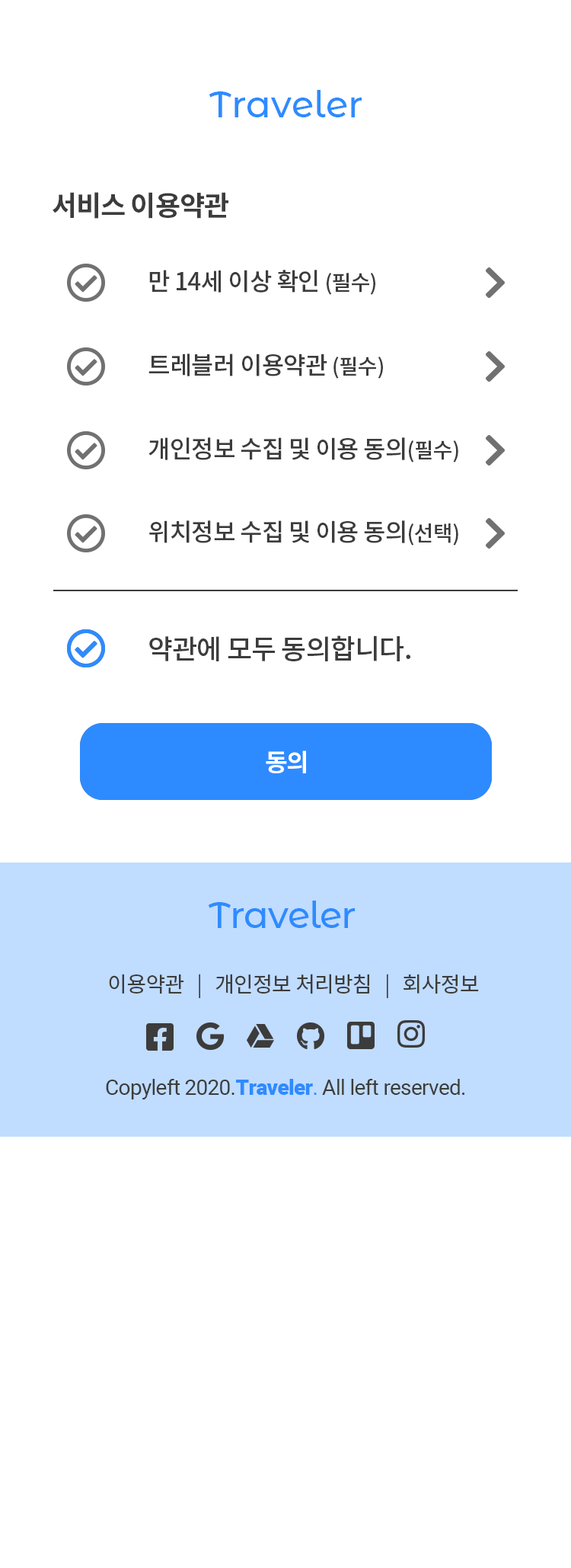
<style>
.page{position:relative;width:571px;height:1568px;background:#ffffff}
.page>*{position:absolute;margin:0}
.t1{font:36.6px "MontserratAlternates-Medium";color:#2e8bff}
.t2{font:27.4px "NotoSansKR-Bold";letter-spacing:-0.025em;color:#3c3c3c}
.t3{font:24.4px "NotoSansKR-Medium";letter-spacing:-0.025em;color:#3c3c3c}
.t4{font:21.3px "NotoSansKR-Medium";letter-spacing:-0.025em;color:#3c3c3c}
.t5{font:27.4px "NotoSansKR-Medium";letter-spacing:-0.025em;color:#3c3c3c}
.t6{font:24.4px "NotoSansKR-Bold";letter-spacing:-0.025em;color:#ffffff}
.t7{font:36.6px "MontserratAlternates-Medium";letter-spacing:-0.025em;color:#2e8bff}
.t8{font:21.3px "NotoSansKR-Regular";letter-spacing:-0.025em;color:#3c3c3c}
.t9{font:21.3px "Roboto-Regular";letter-spacing:-0.025em;color:#3c3c3c}
.t10{font:21.3px "Roboto-Black";letter-spacing:-0.025em;color:#2e8bff}
.t11{font:21.3px "Roboto-Regular";letter-spacing:-0.025em;color:#2e8bff}
</style>
<div class="page">
<p class="t1" style="left:209px;top:90px;width:153px;height:27px">Traveler</p>
<p class="t2" style="left:53px;top:192px;width:176px;height:27px">서비스 이용약관</p>
<p class="t3" style="left:149px;top:270px;width:227px;height:25px">만 14세 이상 확인 <span class="t4">(필수)</span></p>
<p class="t3" style="left:149px;top:354px;width:234px;height:25px">트레블러 이용약관 <span class="t4">(필수)</span></p>
<p class="t3" style="left:149px;top:437px;width:310px;height:25px">개인정보 수집 및 이용 동의<span class="t4">(필수)</span></p>
<p class="t3" style="left:149px;top:520px;width:310px;height:26px">위치정보 수집 및 이용 동의<span class="t4">(선택)</span></p>
<p class="t5" style="left:149px;top:635px;width:262px;height:26px">약관에 모두 동의합니다.</p>
<p class="t6" style="left:266px;top:750px;width:40px;height:23px">동의</p>
<p class="t6" style="left:266px;top:750px;width:40px;height:23px">동의</p>
<p class="t7" style="left:208px;top:901px;width:148px;height:27px">Traveler</p>
<p class="t8" style="left:109px;top:974px;width:370px;height:24px">이용약관   |   개인정보 처리방침   |   회사정보</p>
<p class="t9" style="left:106px;top:1079px;width:360px;height:20px">Copyleft 2020.<span class="t10">Traveler</span><span class="t11">.</span> All left reserved.</p>
</div>
